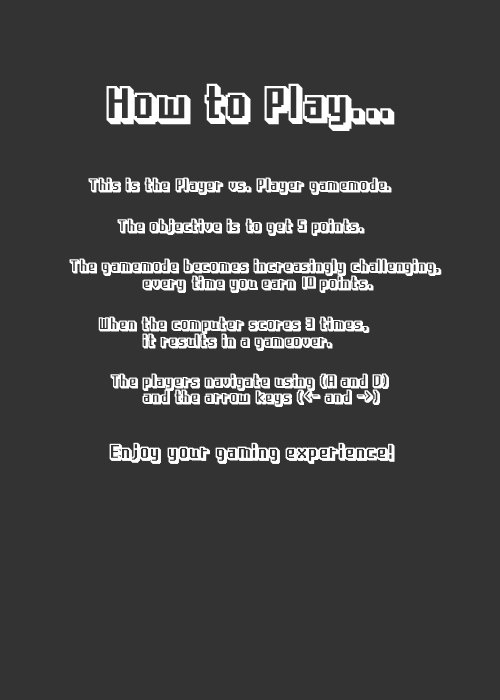
<style>
.page{position:relative;width:500px;height:700px;background:#333333}
.page>*{position:absolute;margin:0}
.t1{font:50px "RixVideoGameP3D";color:#ffffff}
.t2{font:18px "RixVideoGameP3D";color:#fefefe}
.t3{font:18px "RixVideoGameP3D";color:#ffffff}
.t4{font:22px "RixVideoGameP3D";color:#ffffff}
</style>
<div class="page">
<p class="t1" style="left:106px;top:83px;width:289px;height:48px">How to Play...</p>
<p class="t2" style="left:88px;top:177px;width:304px;height:18px">This is the Player vs. Player gamemode.</p>
<p class="t3" style="left:117px;top:218px;width:248px;height:18px">The objective is to get 5 points.</p>
<p class="t3" style="left:69px;top:258px;width:373px;height:18px">The gamemode becomes increasingly challenging,</p>
<p class="t3" style="left:142px;top:275px;width:232px;height:18px">every time you earn 10 points.</p>
<p class="t3" style="left:98px;top:316px;width:272px;height:18px">When the computer scores 3 times,</p>
<p class="t3" style="left:142px;top:333px;width:191px;height:18px">it results in a gameover.</p>
<p class="t3" style="left:110px;top:373px;width:279px;height:18px">The players navigate using (A and D)</p>
<p class="t3" style="left:142px;top:389px;width:238px;height:18px">and the arrow keys (&lt;- and -&gt;)</p>
<p class="t4" style="left:109px;top:442px;width:286px;height:22px">Enjoy your gaming experience!</p>
</div>
